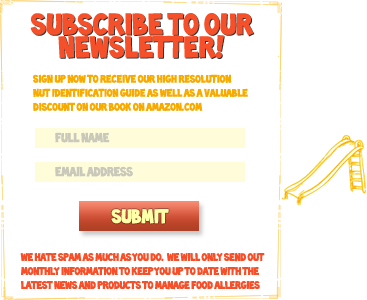
<style>
.page{position:relative;width:367px;height:300px;background:#ffffff}
.page>*{position:absolute;margin:0}
.t1{font:27.5px/22.9px "Toonish";letter-spacing:0.025em;color:#f55029}
.t2{font:10px/14px "Toonish";letter-spacing:0.01em;color:#f7ab01}
.t3{font:12px "Toonish";color:#cac9b9}
.t4{font:18px "Toonish";letter-spacing:0.01em;color:#ffffaa}
.t5{font:10px/14px "Toonish";color:#f55029}
</style>
<div class="page">
<p class="t1" style="left:30px;top:13px;width:224px;height:46px;text-align:center">Subscribe to our<br>Newsletter!</p>
<p class="t2" style="left:33px;top:74px;width:215px;height:37px">Sign up now to receive our High Resolution Nut identification guide as well as a valuable discount on our book on Amazon.com</p>
<p class="t3" style="left:55px;top:132px;width:55px;height:11px">FULL NAME</p>
<p class="t3" style="left:55px;top:166px;width:78px;height:11px">email address</p>
<p class="t4" style="left:111px;top:209px;width:58px;height:15px">Submit</p>
<p class="t5" style="left:20px;top:252px;width:245px;height:38px">We hate spam as much as you do.  We will only send out monthly information to keep you up to date with the latest NEWS AND PRODUCTS TO MANAGE FOOD ALLERGIES</p>
</div>
